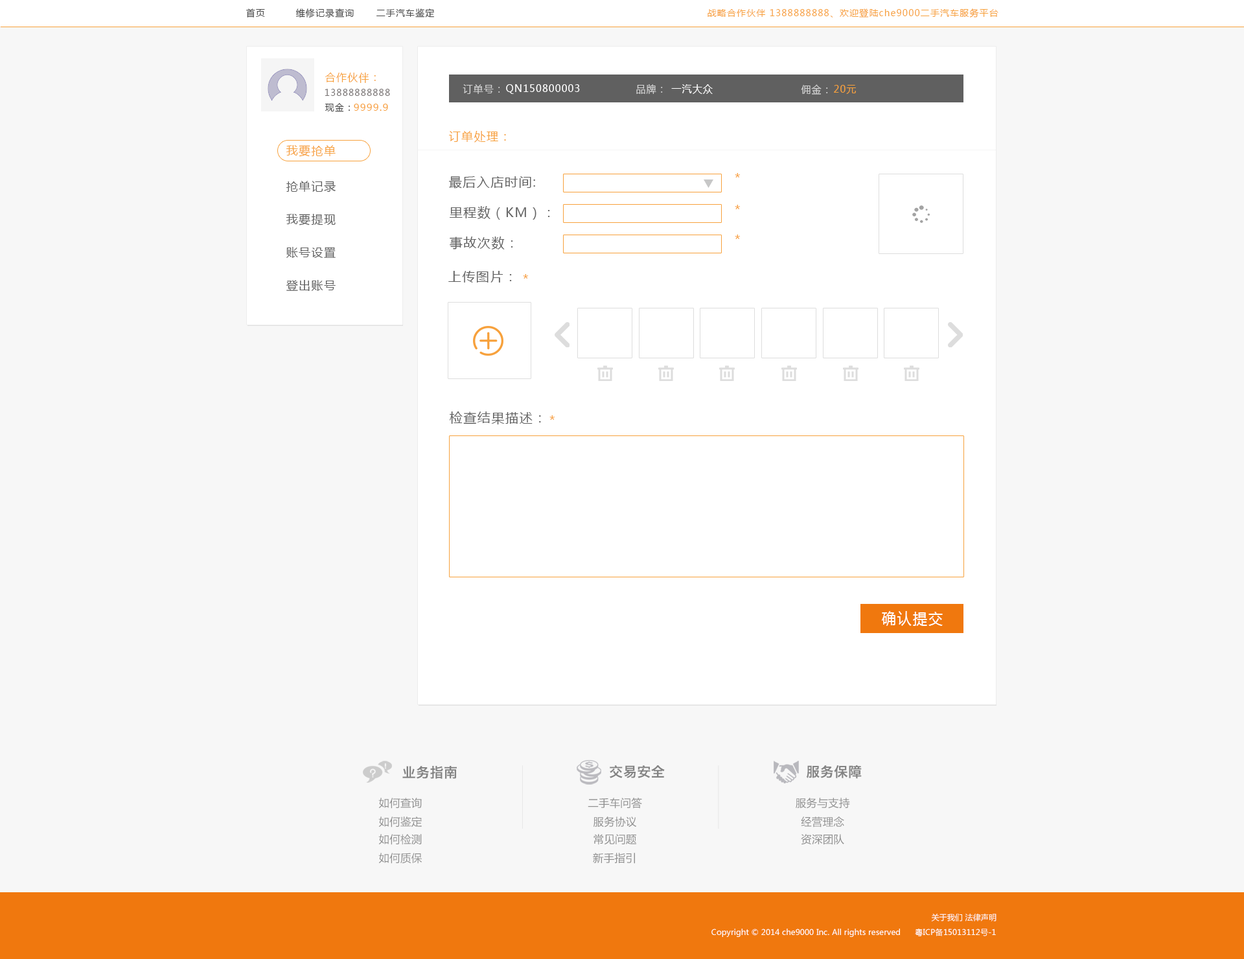
<style>
.page{position:relative;width:1244px;height:959px;background:#f7f7f7}
.page>*{position:absolute;margin:0}
.t1{font:9.1px "MicrosoftYaHei";letter-spacing:0.08em;color:#494949}
.t2{font:9.1px "MicrosoftYaHei";letter-spacing:0.08em;color:#f7a13c}
.t3{font:10.4px "MicrosoftYaHei";letter-spacing:0.08em;color:#f7a13c}
.t4{font:9.1px "MicrosoftYaHei";letter-spacing:0.08em;color:#787373}
.t5{font:10.4px "MicrosoftYaHei";letter-spacing:0.08em;color:#d3d3d3;scale:0.93 1}
.t6{font:10.4px "MicrosoftYaHei";letter-spacing:0.08em;color:#ffffff;scale:0.93 1}
.t7{font:10.4px "MicrosoftYaHei";letter-spacing:0.08em;color:#f7a13c;scale:0.93 1}
.t8{font:9.7px "MicrosoftYaHei";letter-spacing:0.08em;color:#f7a13c}
.t9{font:11.7px "MicrosoftYaHei";letter-spacing:0.08em;color:#f7a13c}
.t10{font:13px "MicrosoftYaHei";letter-spacing:0.08em;color:#f7a13c}
.t11{font:11.7px "MicrosoftYaHei";letter-spacing:0.08em;color:#606060}
.t12{font:13px "MicrosoftYaHei";letter-spacing:0.08em;color:#606060}
.t13{font:15.5px "MicrosoftYaHei";letter-spacing:0.08em;color:#ffffff;scale:0.93 1}
.t14{font:13.8px "HiraginoSansGB-W6";letter-spacing:0.01em;color:#838383}
.t15{font:10.7px "MicrosoftYaHei";letter-spacing:0.01em;color:#909090}
.t16{font:7.8px "MicrosoftYaHei";letter-spacing:0.01em;color:#ffffff}
</style>
<div class="page">
<p class="t1" style="left:246px;top:8px;width:19px;height:9px">首页</p>
<p class="t1" style="left:295px;top:8px;width:59px;height:10px">维修记录查询</p>
<p class="t1" style="left:376px;top:8px;width:58px;height:9px">二手汽车鉴定</p>
<p class="t2" style="left:707px;top:8px;width:291px;height:9px">战略合作伙伴 1388888888、欢迎登陆che9000二手汽车服务平台</p>
<p class="t3" style="left:325px;top:73px;width:51px;height:10px">合作伙伴：</p>
<p class="t4" style="left:325px;top:89px;width:65px;height:7px">13888888888</p>
<p class="t5" style="left:463px;top:84px;width:37px;height:10px">订单号：</p>
<p class="t6" style="left:506px;top:84px;width:74px;height:10px">QN150800003</p>
<p class="t5" style="left:636px;top:84px;width:27px;height:10px">品牌：</p>
<p class="t6" style="left:671px;top:84px;width:42px;height:10px">一汽大众</p>
<p class="t5" style="left:801px;top:84px;width:27px;height:11px">佣金：</p>
<p class="t7" style="left:834px;top:85px;width:22px;height:9px">20元</p>
<p class="t1" style="left:325px;top:103px;width:25px;height:9px">现金：</p>
<p class="t8" style="left:354px;top:104px;width:34px;height:7px">9999.9</p>
<p class="t9" style="left:449px;top:131px;width:57px;height:12px">订单处理：</p>
<p class="t9" style="left:286px;top:145px;width:50px;height:12px">我要抢单</p>
<p class="t10" style="left:735px;top:173px;width:5px;height:4px">*</p>
<p class="t11" style="left:286px;top:181px;width:50px;height:11px">抢单记录</p>
<p class="t12" style="left:449px;top:176px;width:86px;height:13px">最后入店时间:</p>
<p class="t12" style="left:450px;top:206px;width:100px;height:14px">里程数（KM）：</p>
<p class="t10" style="left:735px;top:205px;width:5px;height:4px">*</p>
<p class="t11" style="left:286px;top:214px;width:50px;height:11px">我要提现</p>
<p class="t12" style="left:450px;top:236px;width:63px;height:13px">事故次数：</p>
<p class="t10" style="left:735px;top:235px;width:5px;height:4px">*</p>
<p class="t11" style="left:286px;top:247px;width:50px;height:11px">账号设置</p>
<p class="t11" style="left:286px;top:280px;width:50px;height:11px">登出账号</p>
<p class="t12" style="left:448px;top:271px;width:64px;height:11px">上传图片：</p>
<p class="t10" style="left:523px;top:274px;width:5px;height:5px">*</p>
<p class="t12" style="left:450px;top:411px;width:91px;height:13px">检查结果描述：</p>
<p class="t10" style="left:549px;top:415px;width:6px;height:5px">*</p>
<p class="t13" style="left:881px;top:611px;width:62px;height:15px">确认提交</p>
<p class="t14" style="left:402px;top:766px;width:55px;height:13px">业务指南</p>
<p class="t14" style="left:610px;top:765px;width:55px;height:13px">交易安全</p>
<p class="t14" style="left:806px;top:764px;width:56px;height:15px">服务保障</p>
<p class="t15" style="left:378px;top:797px;width:44px;height:11px">如何查询</p>
<p class="t15" style="left:588px;top:797px;width:54px;height:11px">二手车问答</p>
<p class="t15" style="left:795px;top:797px;width:55px;height:11px">服务与支持</p>
<p class="t15" style="left:378px;top:816px;width:44px;height:11px">如何鉴定</p>
<p class="t15" style="left:593px;top:816px;width:43px;height:11px">服务协议</p>
<p class="t15" style="left:801px;top:816px;width:43px;height:11px">经营理念</p>
<p class="t15" style="left:378px;top:834px;width:44px;height:11px">如何检测</p>
<p class="t15" style="left:593px;top:834px;width:44px;height:11px">常见问题</p>
<p class="t15" style="left:801px;top:834px;width:43px;height:11px">资深团队</p>
<p class="t15" style="left:378px;top:852px;width:44px;height:12px">如何质保</p>
<p class="t15" style="left:593px;top:852px;width:42px;height:12px">新手指引</p>
<p class="t16" style="left:931px;top:913px;width:65px;height:8px">关于我们 法律声明</p>
<p class="t16" style="left:711px;top:928px;width:285px;height:9px">Copyright © 2014 che9000 Inc. All rights reserved      粤ICP备15013112号-1</p>
</div>
